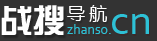
<style>
.page{position:relative;width:157px;height:41px;background:#333333}
.page>*{position:absolute;margin:0}
.t1{font:33px "FZZYJW--GB1-0";color:#ffffff;text-transform:uppercase}
.t2{font:18px "MicrosoftYaHei";letter-spacing:0.24em;color:#ffffff;text-transform:uppercase}
.t3{font:44px "Corbel";color:#2ec1d6}
.t4{font:14px "Corbel";color:#2ec1d6}
</style>
<div class="page">
<p class="t1" style="left:1px;top:5px;width:63px;height:30px">战搜</p>
<p class="t2" style="left:67px;top:5px;width:40px;height:17px">导航</p>
<p class="t3" style="left:112px;top:14px;width:37px;height:20px">cn</p>
<p class="t4" style="left:67px;top:24px;width:44px;height:10px">zhanso.</p>
</div>
